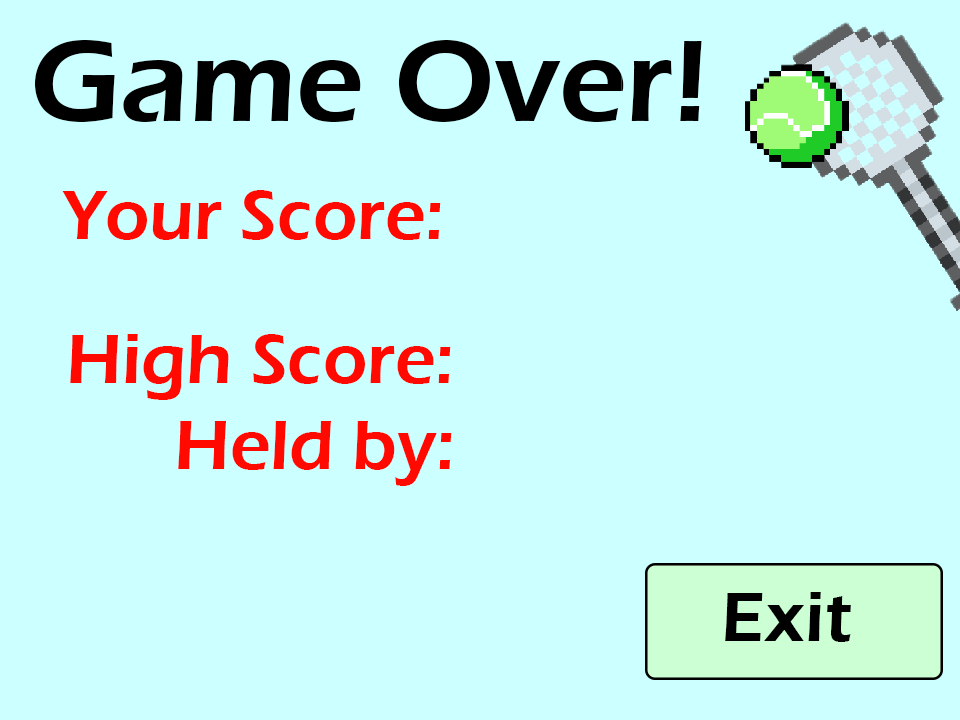
<style>
.page{position:relative;width:960px;height:720px;background:#ccffff}
.page>*{position:absolute;margin:0}
.t1{font:120px "ErasITC-Demi";color:#000000}
.t2{font:72px "ErasITC-Demi";color:#ff0900}
.t3{font:72px "ErasITC-Demi";color:#000000}
</style>
<div class="page">
<p class="t1" style="left:34px;top:40px;width:668px;height:82px">Game Over!</p>
<p class="t2" style="left:62px;top:190px;width:379px;height:50px">Your Score:</p>
<p class="t2" style="left:70px;top:334px;width:382px;height:152px">High Score:<br>     Held by:</p>
<p class="t3" style="left:725px;top:592px;width:126px;height:50px">Exit</p>
</div>
